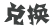
<style>
.page{position:relative;width:54px;height:26px;background:#ffffff}
.page>*{position:absolute;margin:0}
.t1{font:22px "FZJZJW--GB1-0";color:#3d4240}
</style>
<div class="page">
<p class="t1" style="left:4px;top:2px;width:22px;height:23px;rotate:14deg">兑</p>
<p class="t1" style="left:27px;top:3px;width:23px;height:23px;rotate:-9deg">换</p>
</div>
